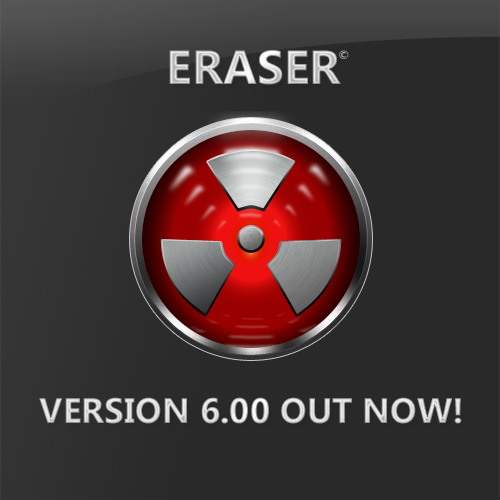
<style>
.page{position:relative;width:500px;height:500px;background:#292929}
.page>*{position:absolute;margin:0}
.t1{font:48px "SegoeUI-Bold"}
.t2{font:12px "SegoeUI-Bold";color:#b1b1b1}
.t3{font:35.3px "SegoeUI-Bold"}
</style>
<div class="page">
<p class="t1" style="left:169px;top:50px;width:172px;height:35px">ERASER</p>
<p class="t2" style="left:339px;top:50px;width:10px;height:9px">©</p>
<p class="t3" style="left:39px;top:397px;width:423px;height:27px">VERSION 6.00 OUT NOW!</p>
</div>
